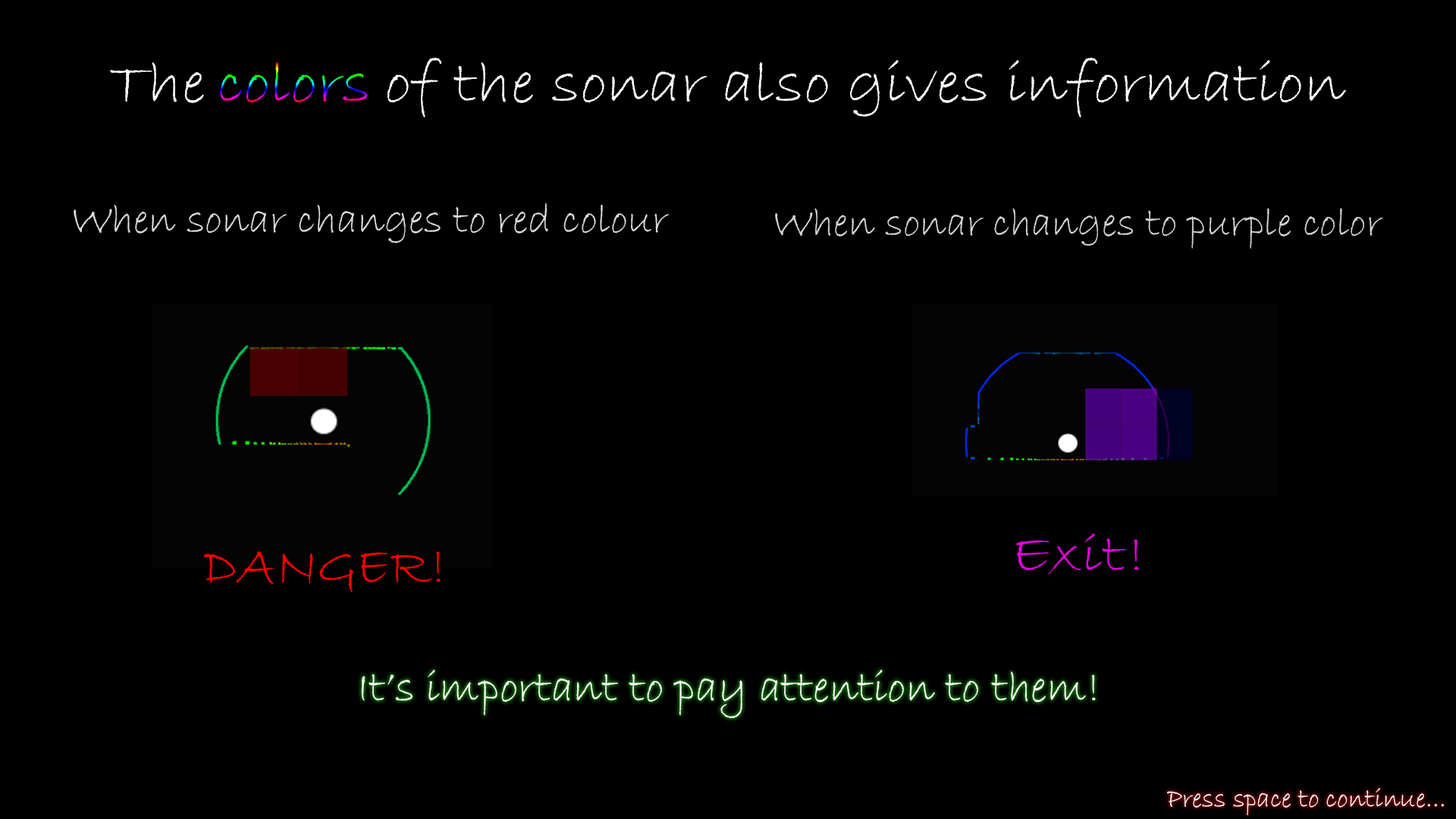
<style>
.page{position:relative;width:1456px;height:819px;background:#000000}
.page>*{position:absolute;margin:0}
.t1{font:60.4px "BradleyHandITC";color:#ffffff;scale:1.09 1}
.t2{font:60.4px "BradleyHandITC";scale:1.09 1}
.t3{font:42.7px "BradleyHandITC";color:#dcdbdb}
.t4{font:41.7px "BradleyHandITC";color:#d6d5d5}
.t5{font:54.6px "BradleyHandITC";color:#e300db;scale:1.23 1}
.t6{font:54.6px "BradleyHandITC";color:#ff0000}
.t7{font:45.5px "BradleyHandITC";color:#ffffff}
.t8{font:27.3px "BradleyHandITC";color:#ffffff}
</style>
<div class="page">
<p class="t1" style="left:110px;top:62px;width:94px;height:41px">The</p>
<p class="t2" style="left:220px;top:62px;width:148px;height:41px">colors</p>
<p class="t1" style="left:387px;top:58px;width:959px;height:60px">of the sonar also gives information</p>
<p class="t3" style="left:74px;top:203px;width:595px;height:40px">When sonar changes to red colour</p>
<p class="t4" style="left:775px;top:208px;width:608px;height:41px">When sonar changes to purple color</p>
<p class="t5" style="left:1016px;top:533px;width:123px;height:42px">Exit!</p>
<p class="t6" style="left:204px;top:551px;width:237px;height:41px">DANGER!</p>
<p class="t7" style="left:361px;top:670px;width:735px;height:48px">It’s important to pay attention to them!</p>
<p class="t8" style="left:1167px;top:788px;width:277px;height:27px">Press space to continue...</p>
</div>
